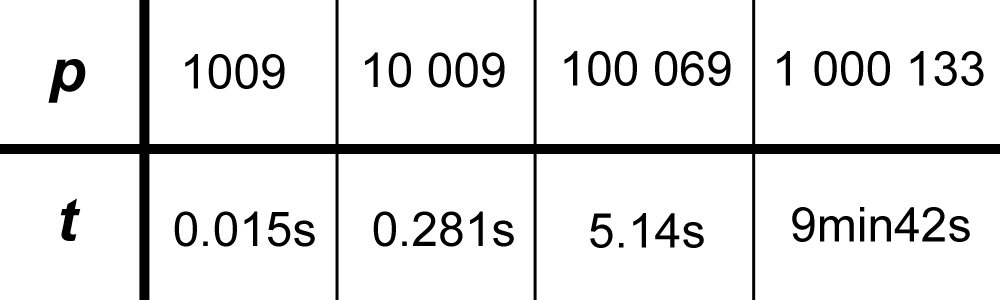
<style>
.page{position:relative;width:1000px;height:300px;background:#ffffff}
.page>*{position:absolute;margin:0}
.t1{font:48px "ArialMT";color:#000000}
.t2{font:60px "Arial-BoldItalicMT";color:#000000}
</style>
<div class="page">
<p class="t1" style="left:185px;top:54px;width:100px;height:35px">1009</p>
<p class="t1" style="left:365px;top:52px;width:140px;height:36px">10 009</p>
<p class="t1" style="left:564px;top:51px;width:167px;height:35px">100 069</p>
<p class="t1" style="left:777px;top:51px;width:207px;height:35px">1 000 133</p>
<p class="t2" style="left:48px;top:59px;width:38px;height:44px">p</p>
<p class="t2" style="left:60px;top:198px;width:21px;height:43px">t</p>
<p class="t1" style="left:792px;top:207px;width:178px;height:35px">9min42s</p>
<p class="t1" style="left:174px;top:211px;width:141px;height:36px">0.015s</p>
<p class="t1" style="left:373px;top:211px;width:141px;height:36px">0.281s</p>
<p class="t1" style="left:590px;top:213px;width:114px;height:35px">5.14s</p>
</div>
